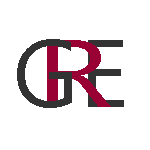
<style>
.page{position:relative;width:150px;height:150px;background:#ffffff}
.page>*{position:absolute;margin:0}
.t1{font:96px "Gadugi";color:#333333}
.t2{font:96px "Gadugi";color:#990033;scale:1.34 1}
</style>
<div class="page">
<p class="t1" style="left:17px;top:39px;width:55px;height:69px">G</p>
<p class="t2" style="left:47px;top:40px;width:64px;height:67px">R</p>
<p class="t1" style="left:88px;top:40px;width:36px;height:67px">E</p>
</div>
